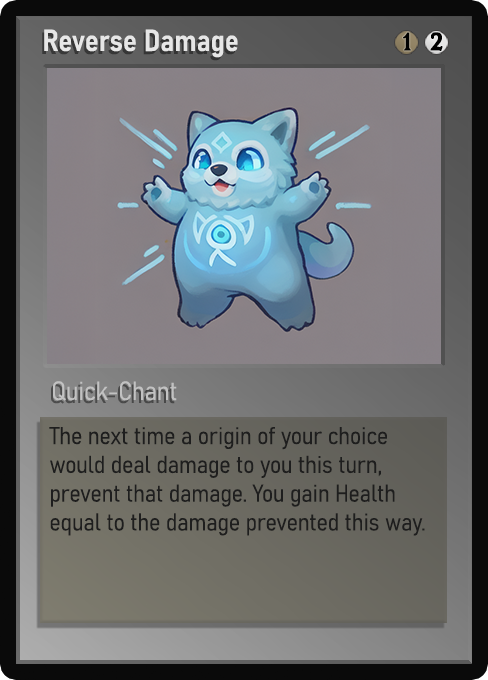
<style>
.page{position:relative;width:488px;height:680px}
.page>*{position:absolute;margin:0}
.t1{font:30px "Bahnschrift-SemiBoldSemiCondensed";color:#f2f2f2;font-weight:bold}
.t2{font:25px "WTRRoycroft";color:#000000;font-weight:bold;scale:1.09 1}
.t3{font:26px "Bahnschrift-LightSemiCondensed";color:#c8c8c8;font-weight:bold}
.t4{font:24px "Bahnschrift-LightSemiCondensed";color:#1e1e1e;font-weight:bold}
</style>
<div class="page">
<p class="t1" style="left:44px;top:29px;width:194px;height:29px;opacity:0.9">Reverse Damage</p>
<p class="t2" style="left:403px;top:32px;width:8px;height:19px">1</p>
<p class="t2" style="left:430px;top:32px;width:13px;height:19px">2</p>
<p class="t3" style="left:53px;top:381px;width:124px;height:20px;opacity:0.9">Quick-Chant</p>
<p class="t4" style="left:49px;top:427px;width:376px;height:109px">The next time a origin of your choice would deal damage to you this turn, prevent that damage. You gain Health equal to the damage prevented this way.</p>
</div>
